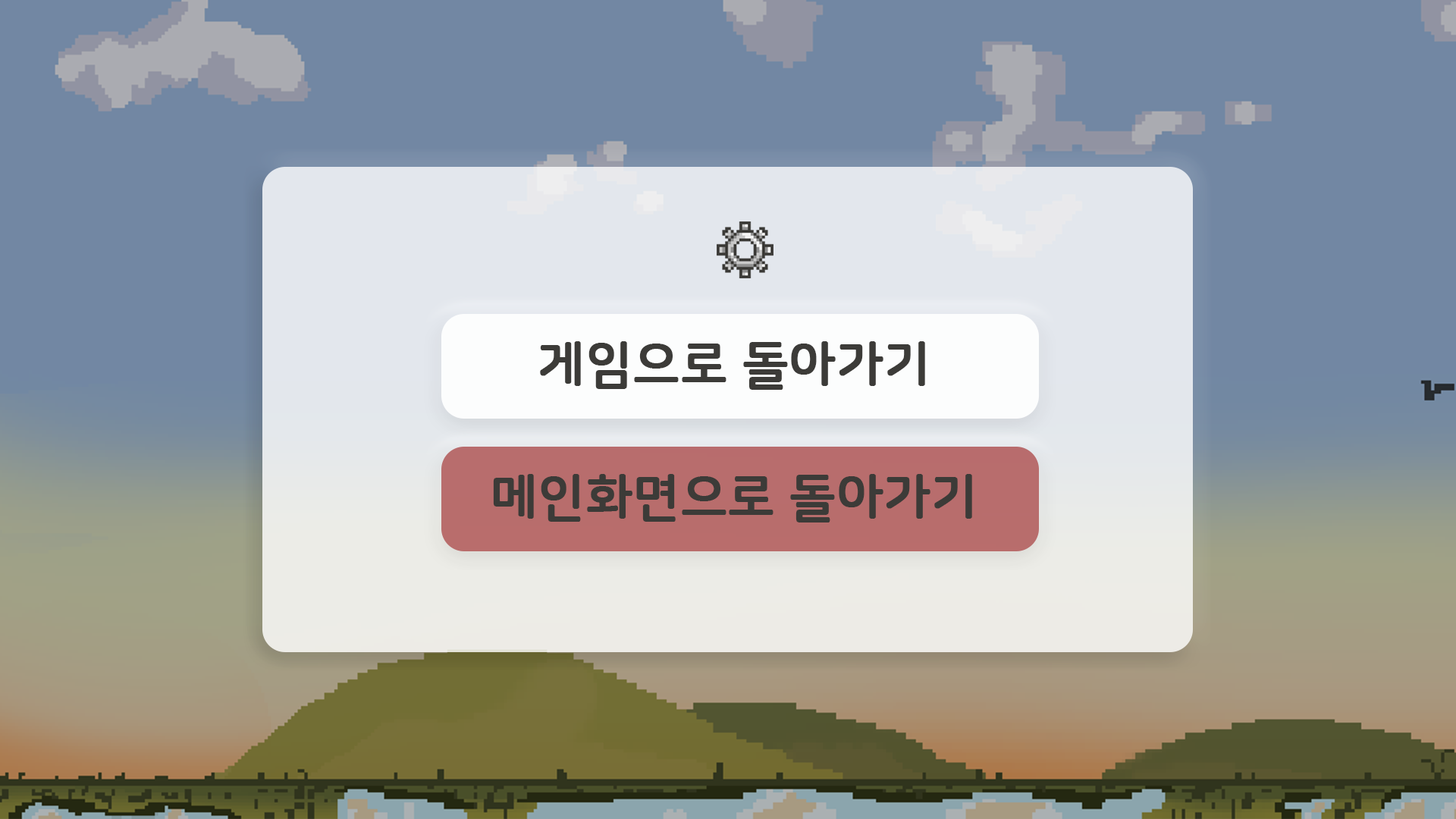
<style>
.page{position:relative;width:1456px;height:819px;background:#7287a3}
.page>*{position:absolute;margin:0}
.t1{font:50.6px "NanumSquareRoundB";color:#3c3b38;font-weight:bold}
</style>
<div class="page">
<p class="t1" style="left:540px;top:341px;width:385px;height:49px">게임으로 돌아가기</p>
<p class="t1" style="left:493px;top:474px;width:479px;height:48px">메인화면으로 돌아가기</p>
</div>
